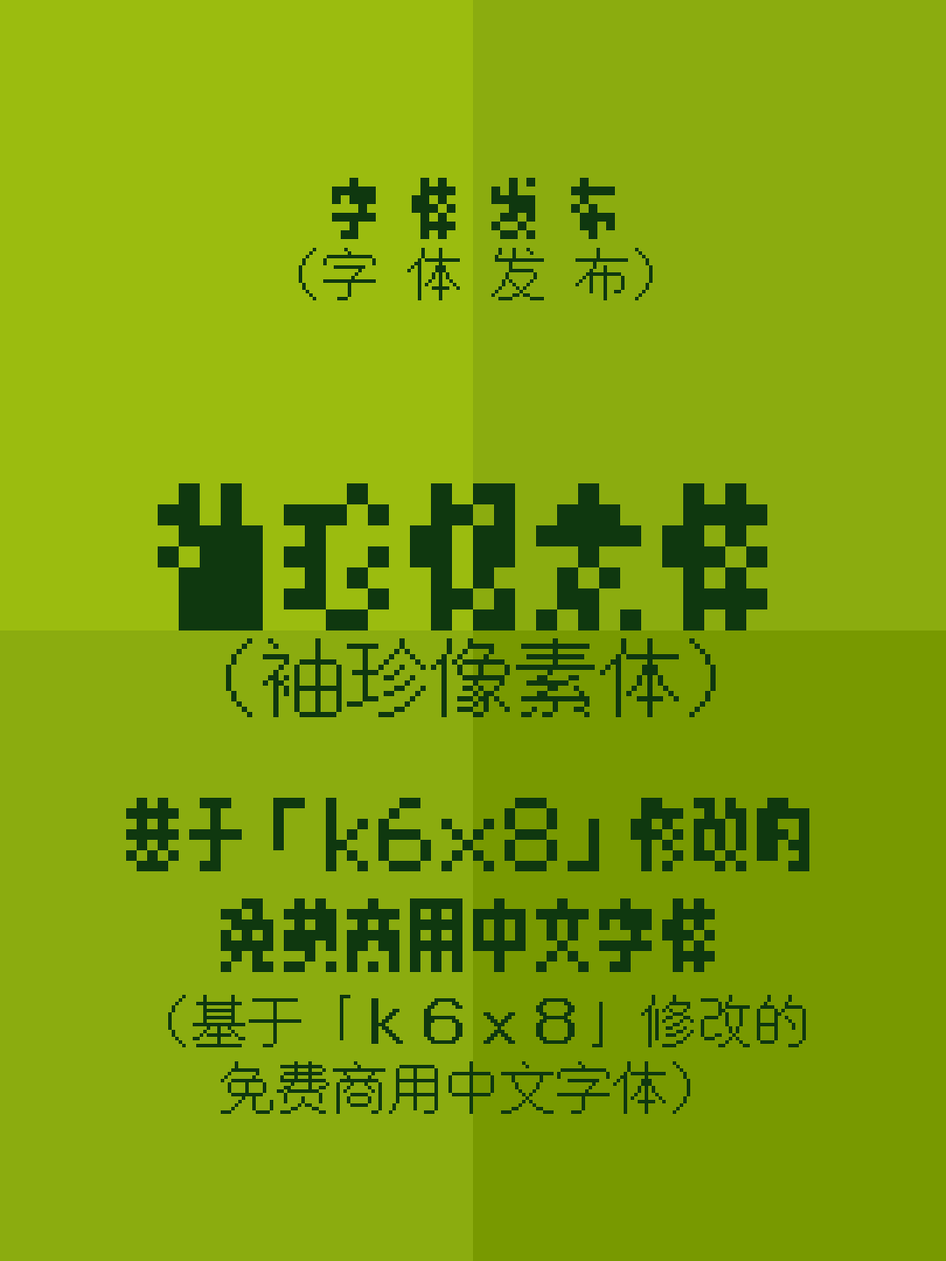
<style>
.page{position:relative;width:946px;height:1261px;background:#8bac0f}
.page>*{position:absolute;margin:0}
.t1{font:70.1px "XiuZhenXiangSuTi";color:#0f380f}
.t2{font:56px "Z-Labs-Round-Bitmap-16px-CN-Regular";color:#0f380f}
.t3{font:70.1px "Z-Labs-Round-Bitmap-16px-CN-Regular";color:#0f380f}
.t4{font:168.1px "XiuZhenXiangSuTi";color:#0f380f}
.t5{font:84.1px "Z-Labs-Round-Bitmap-16px-CN-Regular";color:#0f380f}
.t6{font:84.1px "XiuZhenXiangSuTi";color:#0f380f}
</style>
<div class="page">
<p class="t1" style="left:332px;top:178px;width:283px;height:61px">字 体 发 布</p>
<p class="t2" style="left:299px;top:248px;width:353px;height:52px"><span class="t3"> </span>（字 体 发 布）</p>
<p class="t4" style="left:158px;top:483px;width:609px;height:147px">袖珍像素体</p>
<p class="t5" style="left:226px;top:638px;width:489px;height:79px">（袖珍像素体）</p>
<p class="t6" style="left:126px;top:798px;width:683px;height:174px;text-align:center">基于「ｋ６ｘ８」修改的<br>免费商用中文字体</p>
<p class="t2" style="left:168px;top:995px;width:638px;height:119px;text-align:center">（基于「ｋ６ｘ８」修改的<br>免费商用中文字体）</p>
</div>
